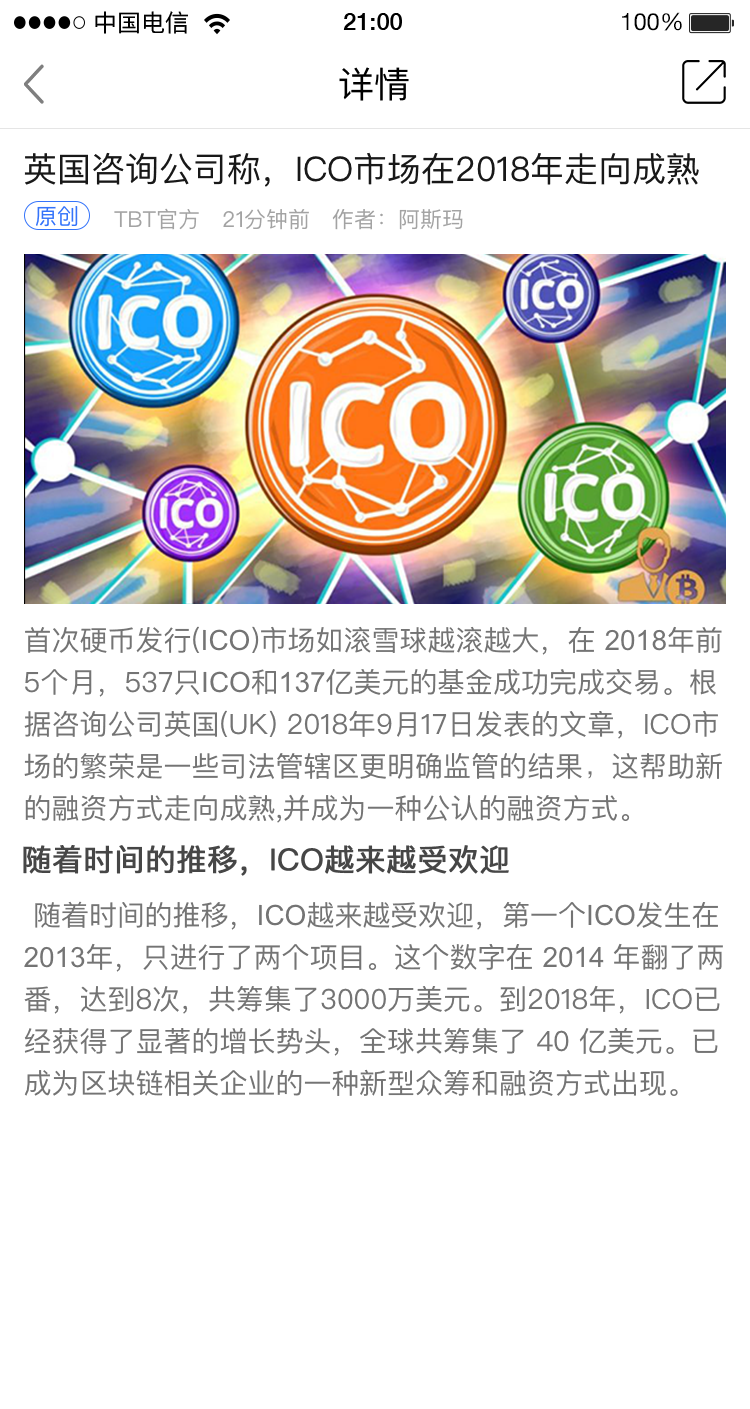
<style>
.page{position:relative;width:750px;height:1409px;background:#ffffff}
.page>*{position:absolute;margin:0}
.t1{font:23.8px "PingFangHK-Regular";letter-spacing:-0.001em;color:#000000}
.t2{font:23.8px "HelveticaNeue-Medium";color:#000000}
.t3{font:23.8px "HelveticaNeue";color:#000000}
.t4{font:36px "PingFangHK-Regular";letter-spacing:-0.001em;color:#000000}
.t5{font:34px "PingFangSC-Regular";letter-spacing:-0.001em;color:#181818}
.t6{font:22px "PingFangSC-Regular";letter-spacing:-0.001em;color:#3574fa}
.t7{font:22px "PingFangSC-Regular";letter-spacing:-0.001em;color:#a3a3a3}
.t8{font:28px/42px "PingFangSC-Regular";letter-spacing:-0.001em;color:#747474}
.t9{font:28px/42px "ArialMT";letter-spacing:-0.001em;color:#747474}
.t10{font:28px/42px "STHeitiSC-Light";letter-spacing:-0.001em;color:#747474}
.t11{font:30px "PingFangSC-Regular";letter-spacing:-0.001em;color:#464646;font-weight:bold}
</style>
<div class="page">
<p class="t1" style="left:95px;top:11px;width:93px;height:23px">中国电信</p>
<p class="t2" style="left:343px;top:13px;width:59px;height:17px">21:00</p>
<p class="t3" style="left:622px;top:12px;width:60px;height:19px">100%</p>
<p class="t4" style="left:339px;top:67px;width:70px;height:34px">详情</p>
<p class="t5" style="left:24px;top:152px;width:675px;height:35px">英国咨询公司称，ICO市场在2018年走向成熟</p>
<p class="t6" style="left:36px;top:206px;width:42px;height:21px">原创</p>
<p class="t7" style="left:114px;top:208px;width:85px;height:22px">TBT官方</p>
<p class="t7" style="left:223px;top:209px;width:86px;height:21px">21分钟前</p>
<p class="t7" style="left:332px;top:209px;width:131px;height:21px">作者：阿斯玛</p>
<p class="t8" style="left:24px;top:626px;width:698px;height:197px">首次硬币发行(<span class="t9">ICO</span>)市场如滚雪球越滚越大，在 <span class="t9">2018</span>年前5个月，537只<span class="t9">ICO</span>和<span class="t9">137</span>亿美元的基金成功完成交易。根据咨询公司英国(UK) 2018年9月17日发表的文章，ICO市场的繁荣是一些司法管辖区更明确监管的结果<span class="t10">，</span>这帮助新的融资方式走向成熟,并成为一种公认的融资方式。</p>
<p class="t11" style="left:23px;top:845px;width:486px;height:31px">随着时间的推移，ICO越来越受欢迎</p>
<p class="t8" style="left:24px;top:901px;width:699px;height:195px">随着时间的推移，<span class="t9">ICO</span>越来越受欢迎，第一个<span class="t9">ICO</span>发生在  <span class="t9">2013</span>年，只进行了两个项目。这个数字在 <span class="t9">2014 </span>年翻了两番，达到8次，共筹集了3000万美元。到2018年，ICO已经获得了显著的增长势头，全球共筹集了 40 亿美元。已成为区块链相关企业的一种新型众筹和融资方式出现。</p>
</div>
